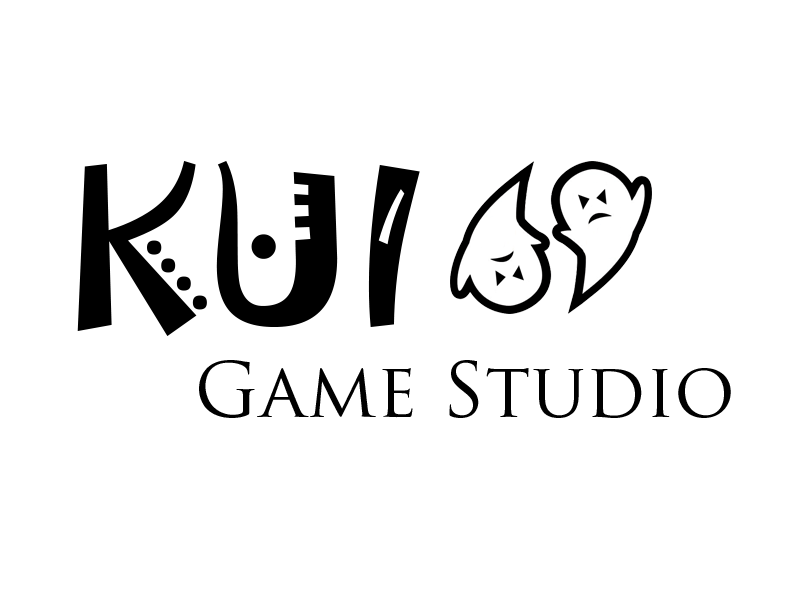
<style>
.page{position:relative;width:800px;height:600px;background:#ffffff}
.page>*{position:absolute;margin:0}
.t1{font:200px "Jokerman-Regular";color:#000000}
.t2{font:75px "TrajanPro-Regular";color:#000000}
</style>
<div class="page">
<p class="t1" style="left:77px;top:160px;width:343px;height:176px">KUI</p>
<p class="t2" style="left:199px;top:360px;width:532px;height:58px">Game Studio</p>
</div>
